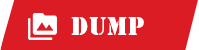
<style>
.page{position:relative;width:199px;height:50px;background:#dc1c25}
.page>*{position:absolute;margin:0}
.t1{font:24px "StencilStd";color:#ffffff}
</style>
<div class="page">
<p class="t1" style="left:71px;top:17px;width:73px;height:18px">DUMP</p>
</div>
